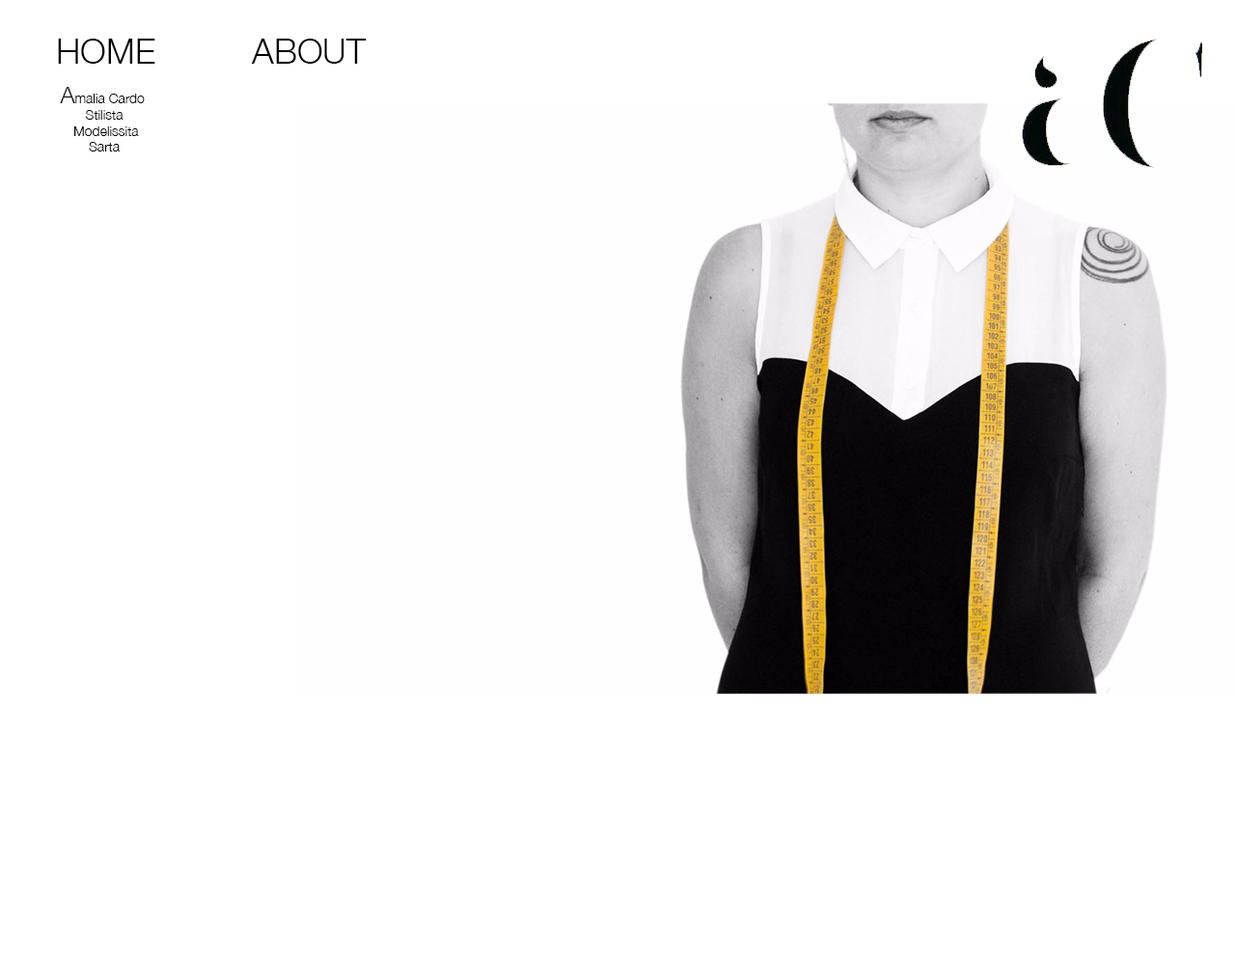
<style>
.page{position:relative;width:1235px;height:965px;background:#ffffff}
.page>*{position:absolute;margin:0}
.t1{font:34.7px "HelveticaNeue-Light";color:#000000}
.t2{font:13.5px "HelveticaNeue-Light";color:#000000}
.t3{font:23.2px "HelveticaNeue-Light";color:#000000}
</style>
<div class="page">
<p class="t1" style="left:58px;top:39px;width:97px;height:25px">HOME</p>
<p class="t1" style="left:251px;top:39px;width:116px;height:25px">ABOUT</p>
<p class="t2" style="left:60px;top:87px;width:85px;height:65px;text-align:center"><span class="t3">A</span>malia Cardo <br>Stilista<br> Modelissita<br>Sarta</p>
</div>
